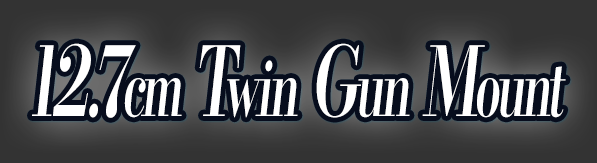
<style>
.page{position:relative;width:597px;height:163px}
.page>*{position:absolute;margin:0}
.t1{font:96px "KochoStd-Heavy";letter-spacing:-0.08em;color:#ffffff;font-style:italic;scale:0.62 1}
.t2{font:76.8px "KochoStd-Heavy";letter-spacing:-0.08em;color:#ffffff;font-style:italic;scale:0.62 1}
</style>
<div class="page">
<p class="t1" style="left:32px;top:43px;width:534px;height:75px">12.7<span class="t2">cm</span> T<span class="t2">win</span> G<span class="t2">un</span> M<span class="t2">ount</span></p>
</div>
